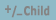
<style>
.page{position:relative;width:56px;height:20px;background:#8fbac7}
.page>*{position:absolute;margin:0}
.t1{font:12px "Verdana-Bold";color:#858383;font-weight:bold;scale:0.75 1}
.t2{font:12px "Verdana-Bold";letter-spacing:-0.1em;color:#858383;font-weight:bold;scale:0.75 1}
.t3{font:12px "Verdana-Bold";letter-spacing:-0.1em;color:#858383;font-weight:bold;scale:0.6 1}
</style>
<div class="page">
<p class="t1" style="left:4px;top:3px;width:46px;height:16px"><span class="t2">+/</span><span class="t3">_ </span>Child</p>
</div>
